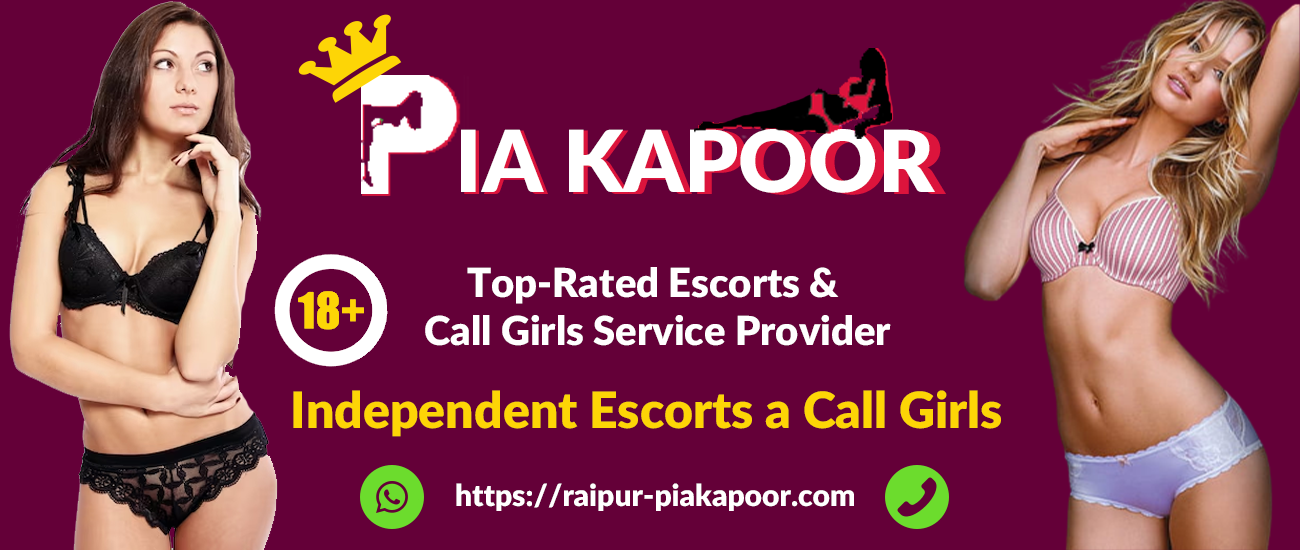
<style>
.page{position:relative;width:1300px;height:550px;background:#640038}
.page>*{position:absolute;margin:0}
.t1{font:85.6px "Lato-Black";color:#ffffff}
.t2{font:87.1px "Lato-Black"}
.t3{font:40px "Lato-Black";color:#ffffff}
.t4{font:50px "Lato-Black";color:#fdd506}
.t5{font:30px "Lato-Black";color:#ffffff}
</style>
<div class="page">
<p class="t1" style="left:461px;top:129px;width:474px;height:64px">IA KAPOOR</p>
<p class="t2" style="left:464px;top:130px;width:482px;height:65px">IA KAPOOR</p>
<p class="t3" style="left:425px;top:267px;width:466px;height:79px;text-align:center">Top-Rated Escorts &amp; <br>Call Girls Service Provider</p>
<p class="t4" style="left:293px;top:390px;width:708px;height:47px">Independent Escorts a Call Girls</p>
<p class="t5" style="left:456px;top:483px;width:398px;height:28px">https://raipur-piakapoor.com</p>
</div>
